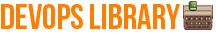
<style>
.page{position:relative;width:216px;height:35px;background:#ffffff}
.page>*{position:absolute;margin:0}
.t1{font:36px "BebasNeue";color:#ff7e00}
</style>
<div class="page">
<p class="t1" style="left:1px;top:4px;width:179px;height:25px">DevOps LIBRARY</p>
</div>
